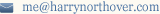
<style>
.page{position:relative;width:160px;height:14px;background:#fdfaf2}
.page>*{position:absolute;margin:0}
.t1{font:13px "Georgia";color:#456fa1;scale:0.94 1}
</style>
<div class="page">
<p class="t1" style="left:22px;top:1px;width:137px;height:13px">me@harrynorthover.com</p>
</div>
